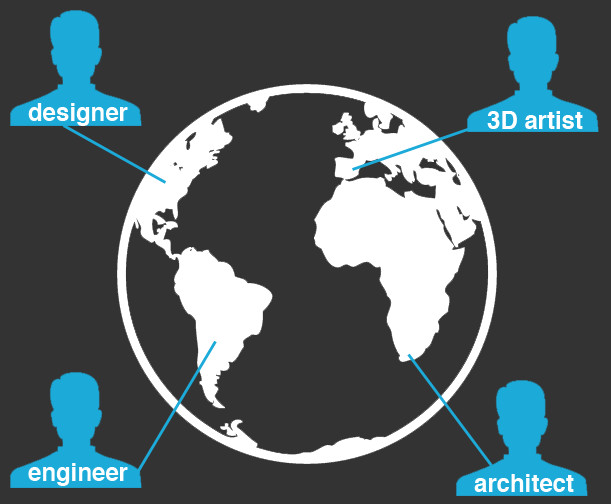
<style>
.page{position:relative;width:611px;height:504px;background:#333333}
.page>*{position:absolute;margin:0}
.t1{font:24px "Helvetica-Bold";color:#ffffff}
</style>
<div class="page">
<p class="t1" style="left:28px;top:103px;width:100px;height:23px">designer</p>
<p class="t1" style="left:487px;top:111px;width:96px;height:18px">3D artist</p>
<p class="t1" style="left:28px;top:463px;width:100px;height:23px">engineer</p>
<p class="t1" style="left:474px;top:474px;width:100px;height:18px">architect</p>
</div>
